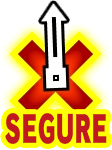
<style>
.page{position:relative;width:112px;height:150px;background:#ffffff}
.page>*{position:absolute;margin:0}
.t1{font:37.3px "RodinNTLGPro-UB";color:#c0191f;scale:0.61 1}
</style>
<div class="page">
<p class="t1" style="left:5px;top:113px;width:102px;height:31px">SEGURE</p>
</div>
